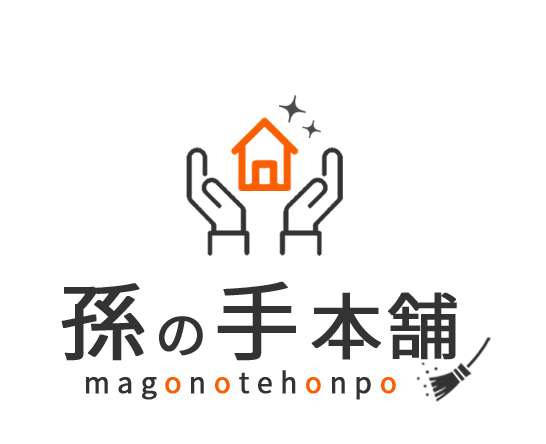
<style>
.page{position:relative;width:546px;height:444px;background:#ffffff}
.page>*{position:absolute;margin:0}
.t1{font:72.3px "SourceHanSansJP-Regular";letter-spacing:0.1em;color:#333333;font-weight:bold}
.t2{font:85px "SourceHanSansJP-Regular";letter-spacing:0.1em;color:#333333;font-weight:bold}
.t3{font:51px "SourceHanSansJP-Regular";letter-spacing:0.1em;color:#333333;font-weight:bold}
.t4{font:28px "SourceHanSansJP-Regular";letter-spacing:0.25em;color:#333333;font-weight:bold}
.t5{font:28px "SourceHanSansJP-Regular";letter-spacing:0.25em;color:#fa6003;font-weight:bold}
</style>
<div class="page">
<p class="t1" style="left:61px;top:281px;width:396px;height:80px"><span class="t2">孫</span><span class="t3">の</span><span class="t2">手</span>本舗</p>
<p class="t4" style="left:86px;top:370px;width:310px;height:30px">mag<span class="t5">o</span>n<span class="t5">o</span>teh<span class="t5">o</span>np<span class="t5">o</span></p>
</div>
